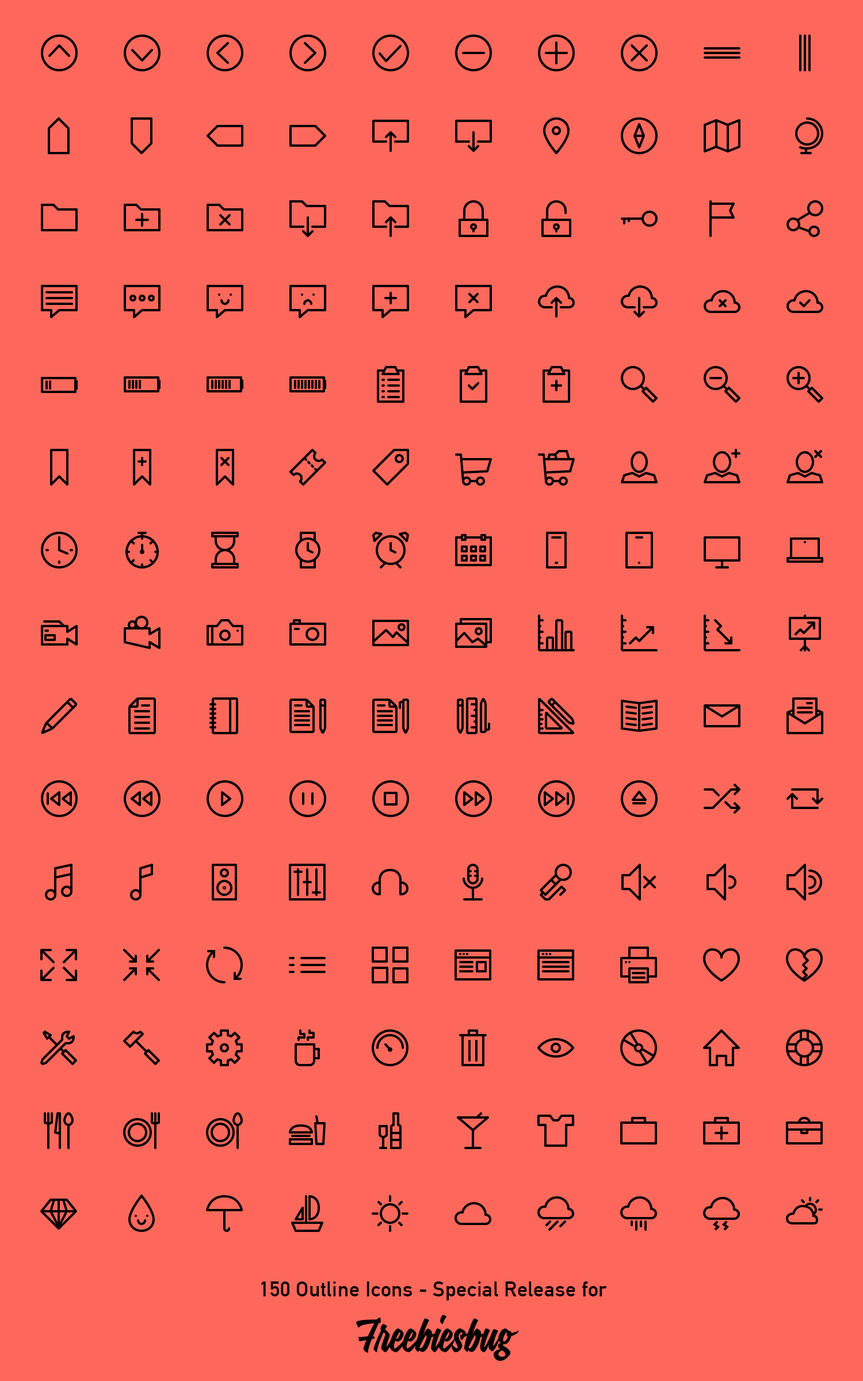
<style>
.page{position:relative;width:863px;height:1381px;background:#fd685b}
.page>*{position:absolute;margin:0}
.t1{font:20.7px "DINAlternate-Bold";letter-spacing:0.02em;color:#000000}
</style>
<div class="page">
<p class="t1" style="left:261px;top:1282px;width:346px;height:19px">150 Outline Icons - Special Release for</p>
</div>
